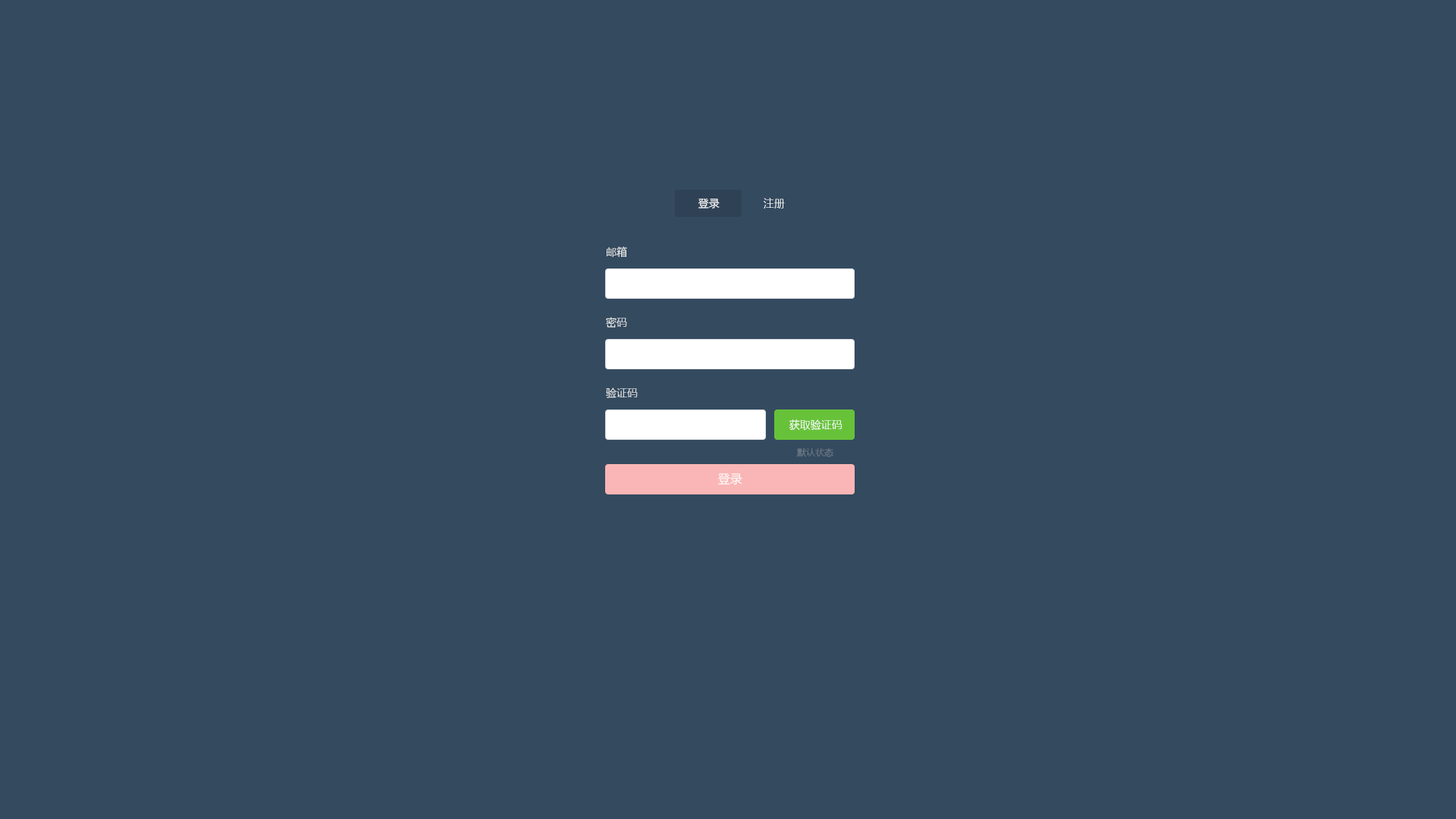
<style>
.page{position:relative;width:1456px;height:819px;background:#344a5f}
.page>*{position:absolute;margin:0}
.t1{font:10.6px "MicrosoftYaHeiLight";color:#ffffff}
.t2{font:10.6px "MicrosoftYaHeiLight";color:#eeeeee}
.t3{font:9.1px "MicrosoftYaHeiLight";color:#6e7b88}
.t4{font:12.1px "MicrosoftYaHeiLight";color:#ffffff}
</style>
<div class="page">
<p class="t1" style="left:698px;top:198px;width:87px;height:11px">登录              注册</p>
<p class="t2" style="left:607px;top:246px;width:20px;height:11px">邮箱</p>
<p class="t2" style="left:606px;top:317px;width:21px;height:11px">密码</p>
<p class="t2" style="left:606px;top:388px;width:32px;height:10px">验证码</p>
<p class="t1" style="left:789px;top:419px;width:53px;height:11px">获取验证码</p>
<p class="t3" style="left:797px;top:448px;width:36px;height:9px">默认状态</p>
<p class="t4" style="left:718px;top:472px;width:24px;height:13px">登录</p>
</div>
